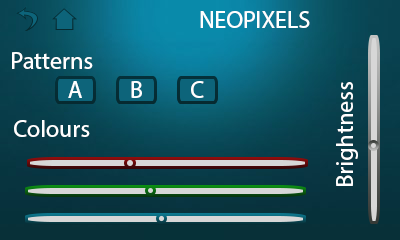
<style>
.page{position:relative;width:400px;height:240px}
.page>*{position:absolute;margin:0}
.t1{font:24px "MyriadHebrew-Regular";color:#ffffff}
.t2{font:24.1px "MyriadHebrew-Regular";color:#ffffff}
</style>
<div class="page">
<p class="t1" style="left:200px;top:11px;width:110px;height:17px">NEOPIXELS</p>
<p class="t1" style="left:12px;top:52px;width:81px;height:17px">Patterns</p>
<p class="t1" style="left:68px;top:81px;width:14px;height:17px">A</p>
<p class="t1" style="left:68px;top:81px;width:14px;height:17px">A</p>
<p class="t1" style="left:131px;top:81px;width:11px;height:17px">B</p>
<p class="t1" style="left:131px;top:81px;width:11px;height:17px">B</p>
<p class="t1" style="left:191px;top:81px;width:13px;height:17px">C</p>
<p class="t1" style="left:191px;top:81px;width:13px;height:17px">C</p>
<p class="t2" style="left:336px;top:82px;width:22px;height:104px;rotate:-90deg">Brightness</p>
<p class="t1" style="left:14px;top:120px;width:76px;height:17px">Colours</p>
</div>
